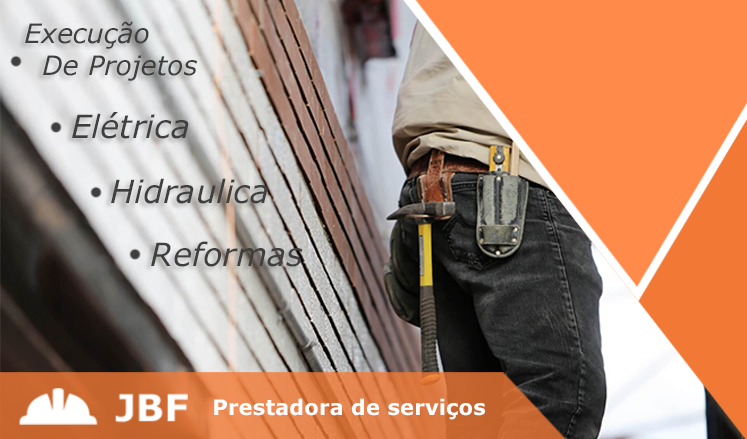
<style>
.page{position:relative;width:747px;height:439px}
.page>*{position:absolute;margin:0}
.t1{font:26.7px "Verdana-Italic";color:#3f3f3f}
.t2{font:32px "Verdana-Italic";color:#3f3f3f}
.t3{font:21.3px "Verdana-Bold";color:#ffffff}
</style>
<div class="page">
<p class="t1" style="left:25px;top:21px;width:172px;height:60px;text-align:center">Execução <br>       De Projetos</p>
<p class="t2" style="left:72px;top:112px;width:117px;height:27px">Elétrica</p>
<p class="t2" style="left:111px;top:178px;width:157px;height:26px">Hidraulica</p>
<p class="t2" style="left:151px;top:241px;width:152px;height:26px">Reformas</p>
<p class="t3" style="left:214px;top:398px;width:271px;height:22px">Prestadora de serviços</p>
</div>
